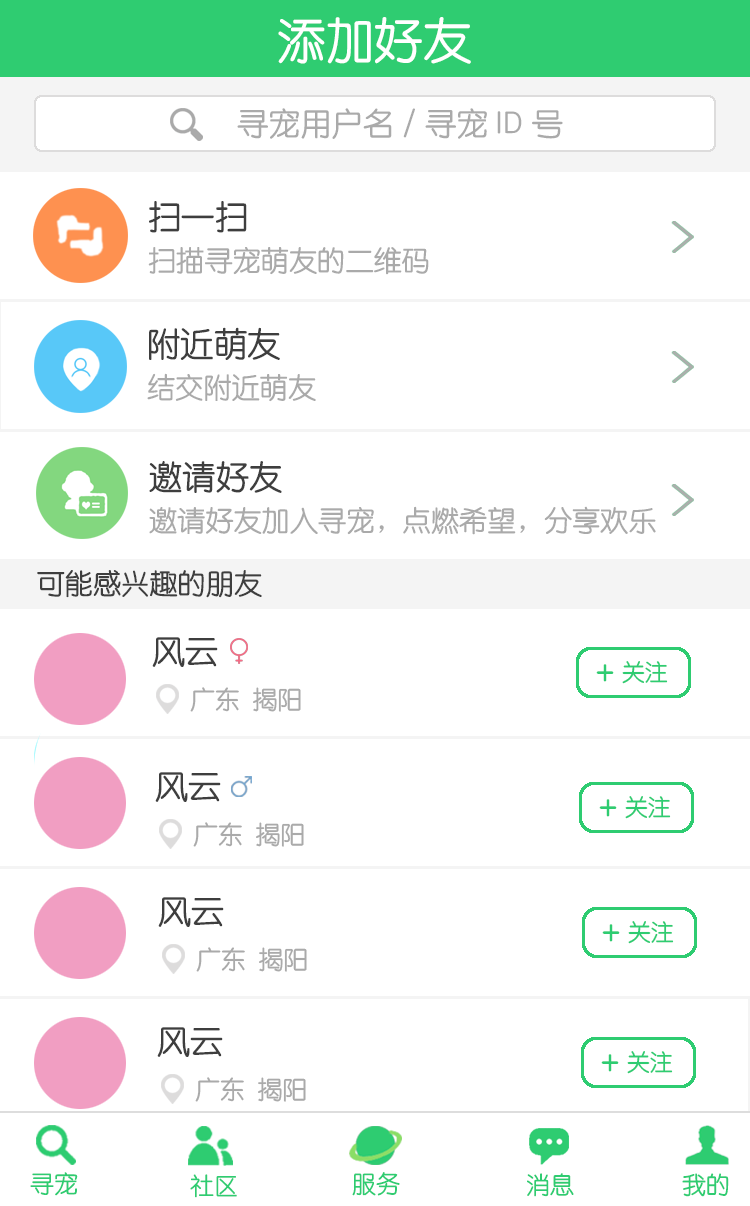
<style>
.page{position:relative;width:750px;height:1206px;background:#ffffff}
.page>*{position:absolute;margin:0}
.t1{font:48.7px "STYuanti-SC-Regular";color:#ffffff}
.t2{font:31.6px "STYuanti-SC-Regular";color:#aaaaaa}
.t3{font:28.2px/45.8px "STYuanti-SC-Regular";color:#aaaaaa}
.t4{font:33.4px/45.8px "STYuanti-SC-Regular";color:#3e3e3e}
.t5{font:33.3px/45.8px "STYuanti-SC-Regular";color:#3e3e3e}
.t6{font:28.2px "STYuanti-SC-Regular";color:#3e3e3e}
.t7{font:33.3px "STYuanti-SC-Regular";color:#3e3e3e}
.t8{font:34.4px "STYuanti-SC-Regular";color:#2ecc71}
.t9{font:22.9px "STYuanti-SC-Regular";color:#2ecc71}
.t10{font:25px "STYuanti-SC-Regular";color:#aaaaaa}
.t11{font:24px "STYuanti-SC-Regular";color:#2ecc71}
.t12{font:24px "STYuanti-SC-Regular"}
</style>
<div class="page">
<p class="t1" style="left:278px;top:17px;width:193px;height:47px">添加好友</p>
<p class="t2" style="left:237px;top:108px;width:326px;height:31px">寻宠用户名/寻宠ID号</p>
<p class="t3" style="left:148px;top:201px;width:281px;height:74px"><span class="t4">扫一扫<br></span>扫描寻宠萌友的二维码</p>
<p class="t3" style="left:147px;top:327px;width:169px;height:75px"><span class="t4">附近萌友<br></span>结交附近萌友</p>
<p class="t3" style="left:149px;top:461px;width:507px;height:74px"><span class="t5">邀请好友<br></span>邀请好友加入寻宠，点燃希望，分享欢乐</p>
<p class="t6" style="left:37px;top:570px;width:225px;height:28px">可能感兴趣的朋友</p>
<p class="t7" style="left:152px;top:637px;width:66px;height:30px">风云</p>
<p class="t8" style="left:596px;top:664px;width:18px;height:18px">+</p>
<p class="t9" style="left:622px;top:661px;width:46px;height:23px">关注</p>
<p class="t10" style="left:190px;top:687px;width:111px;height:25px">广东  揭阳</p>
<p class="t7" style="left:155px;top:772px;width:66px;height:30px">风云</p>
<p class="t9" style="left:625px;top:796px;width:46px;height:23px">关注</p>
<p class="t8" style="left:599px;top:799px;width:18px;height:18px">+</p>
<p class="t10" style="left:193px;top:822px;width:111px;height:25px">广东  揭阳</p>
<p class="t7" style="left:158px;top:897px;width:66px;height:30px">风云</p>
<p class="t8" style="left:602px;top:924px;width:18px;height:18px">+</p>
<p class="t9" style="left:628px;top:921px;width:46px;height:23px">关注</p>
<p class="t10" style="left:196px;top:947px;width:111px;height:25px">广东  揭阳</p>
<p class="t7" style="left:157px;top:1027px;width:66px;height:30px">风云</p>
<p class="t8" style="left:601px;top:1054px;width:18px;height:18px">+</p>
<p class="t9" style="left:627px;top:1051px;width:46px;height:23px">关注</p>
<p class="t10" style="left:195px;top:1077px;width:111px;height:25px">广东  揭阳</p>
<p class="t11" style="left:30px;top:1172px;width:48px;height:24px">寻宠</p>
<p class="t11" style="left:190px;top:1174px;width:47px;height:24px">社区</p>
<p class="t12" style="left:352px;top:1173px;width:48px;height:24px">服务</p>
<p class="t11" style="left:352px;top:1172px;width:48px;height:24px">服务</p>
<p class="t12" style="left:526px;top:1173px;width:47px;height:24px">消息</p>
<p class="t11" style="left:527px;top:1173px;width:47px;height:24px">消息</p>
<p class="t11" style="left:682px;top:1173px;width:47px;height:24px">我的</p>
<p class="t11" style="left:682px;top:1173px;width:47px;height:24px">我的</p>
</div>
